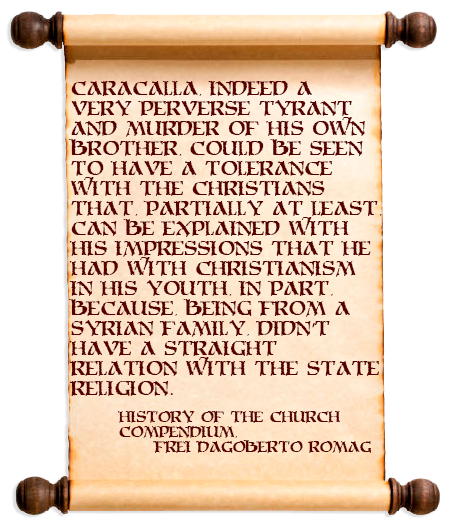
<style>
.page{position:relative;width:451px;height:526px;background:#ffffff}
.page>*{position:absolute;margin:0}
.t1{font:16.7px "MoriaCitadel";color:#580000}
.t2{font:16.7px "MyriadPro-Regular";color:#580000}
.t3{font:12.5px "MoriaCitadel";color:#580000}
</style>
<div class="page">
<p class="t1" style="left:69px;top:81px;width:313px;height:315px">Caracalla, indeed a<br>very perverse tyrant<br>and murder of his own<br>brother, could be seen<br>to have a tolerance<br>with the christians<br>that, partially at least,<br>can be explained with<br>his impressions that he<br>had with christianism<br>in his youth, in part,<br>because, being from a<br>Syrian family, didn<span class="t2">’</span>t<br>have a straight<br>relation with the State<br>religion.</p>
<p class="t3" style="left:118px;top:410px;width:253px;height:43px">History of the Church<br>Compendium,<br> Frei Dagoberto Romag</p>
</div>
